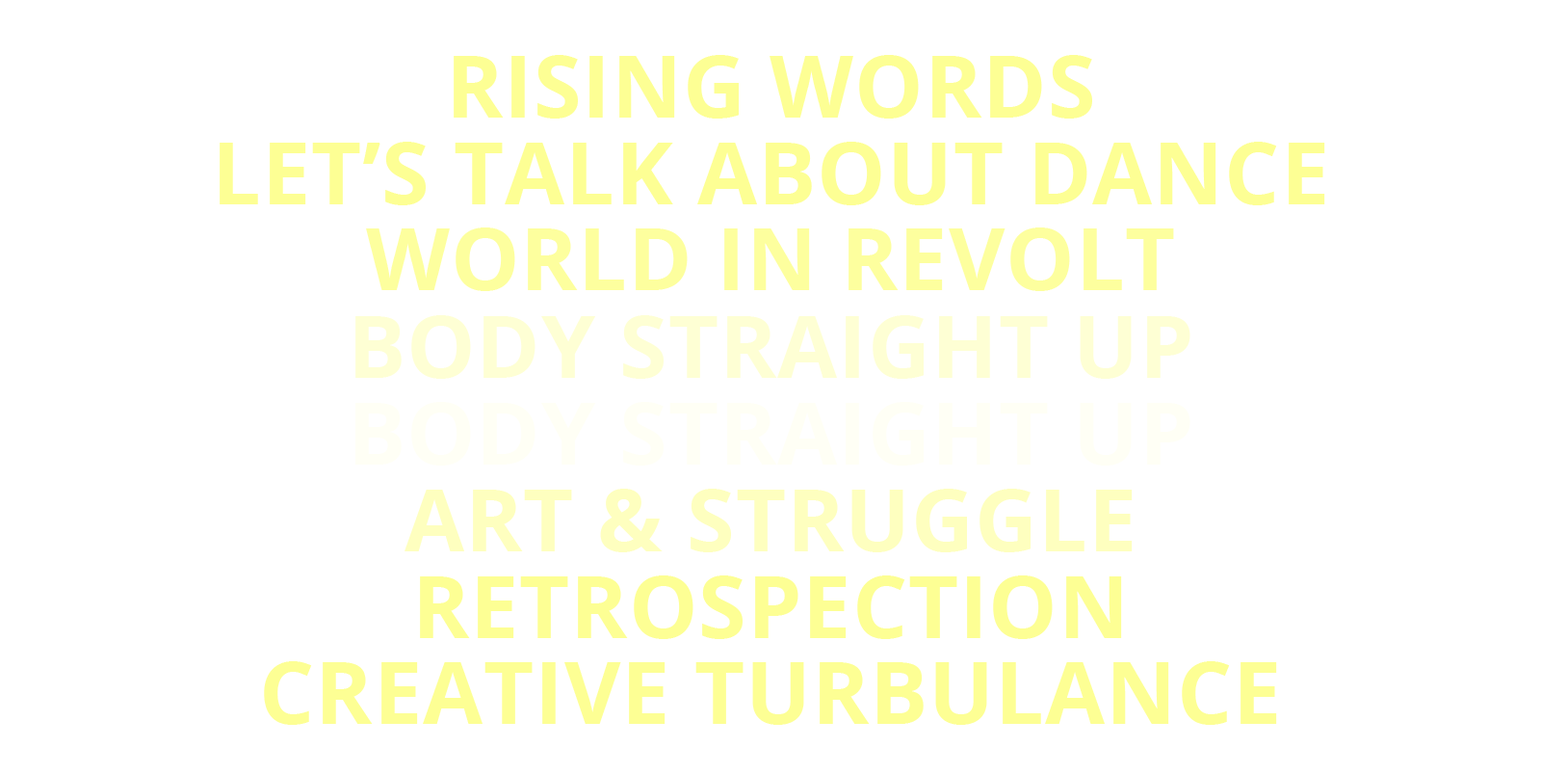
<style>
.page{position:relative;width:1541px;height:774px;background:#ffffff}
.page>*{position:absolute;margin:0}
.t1{font:86.7px "OpenSans-Bold";letter-spacing:0.01em;color:#fdff94;text-transform:uppercase}
.t2{font:86.7px "OpenSans-Bold";letter-spacing:0.01em;color:#feffd4;text-transform:uppercase}
.t3{font:86.7px "OpenSans-Bold";letter-spacing:0.01em;color:#fffff5;text-transform:uppercase}
.t4{font:86.7px "OpenSans-Bold";letter-spacing:0.01em;color:#feffbf;text-transform:uppercase}
</style>
<div class="page">
<p class="t1" style="left:454px;top:55px;width:638px;height:63px">rising words</p>
<p class="t1" style="left:220px;top:142px;width:1106px;height:63px">let’s talk about dance</p>
<p class="t1" style="left:366px;top:227px;width:808px;height:64px;opacity:0.9">world in revolt</p>
<p class="t2" style="left:355px;top:315px;width:836px;height:64px">body straight up</p>
<p class="t3" style="left:355px;top:402px;width:836px;height:63px">body straight up</p>
<p class="t4" style="left:405px;top:488px;width:728px;height:64px">art &amp; struggle</p>
<p class="t1" style="left:420px;top:575px;width:702px;height:64px">retrospection</p>
<p class="t1" style="left:264px;top:661px;width:1013px;height:63px">creative turbulance</p>
</div>
